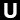
<style>
.page{position:relative;width:20px;height:20px;background:#000000}
.page>*{position:absolute;margin:0}
.t1{font:20px "HelveticaNeue-Bold";color:#ffffff}
</style>
<div class="page">
<p class="t1" style="left:4px;top:3px;width:13px;height:15px">U</p>
</div>
